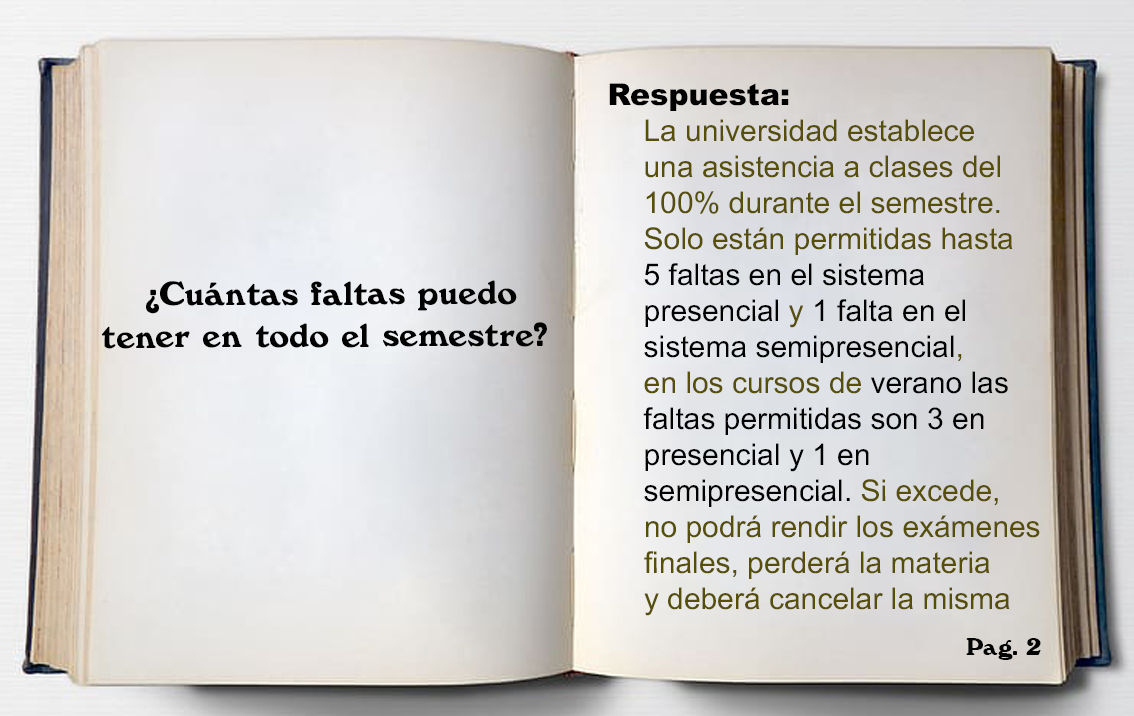
<style>
.page{position:relative;width:1134px;height:716px}
.page>*{position:absolute;margin:0}
.t1{font:30px "ArialMT";color:#564e09}
.t2{font:30px "Arial-Black";color:#020202}
.t3{font:30px "ArialMT";color:#020202}
.t4{font:35px "Windsor-Regular";color:#020202}
.t5{font:25px "Windsor-Regular";color:#040404}
</style>
<div class="page">
<p class="t1" style="left:609px;top:83px;width:431px;height:533px"><span class="t2">Respuesta: <br>  </span>La universidad establece <br> una asistencia a clases del <br> 100% durante el semestre. <br> Solo están permitidas hasta <br> <span class="t3">5 faltas en el sistema <br> presencial </span>y <span class="t3">1 falta en el <br> sistema semipresencial</span>, <br> en los cursos de <span class="t3">verano las<br> faltas permitidas son 3 en <br> presencial y 1 en <br> semipresencial. </span>Si excede, <br> no podrá rendir los exámenes<br> finales, perderá la materia <br> y deberá cancelar la misma</p>
<p class="t4" style="left:102px;top:280px;width:445px;height:69px;text-align:center">¿Cuántas faltas puedo<br> tener en todo el semestre?</p>
<p class="t5" style="left:966px;top:638px;width:75px;height:22px">Pag. 2</p>
</div>
